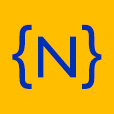
<style>
.page{position:relative;width:114px;height:114px;background:#ffbf00}
.page>*{position:absolute;margin:0}
.t1{font:68.8px "GillSans";color:#0030b2}
.t2{font:60.4px "GillSans";color:#0030b2}
</style>
<div class="page">
<p class="t1" style="left:12px;top:24px;width:90px;height:65px">{<span class="t2">N</span>}</p>
</div>
